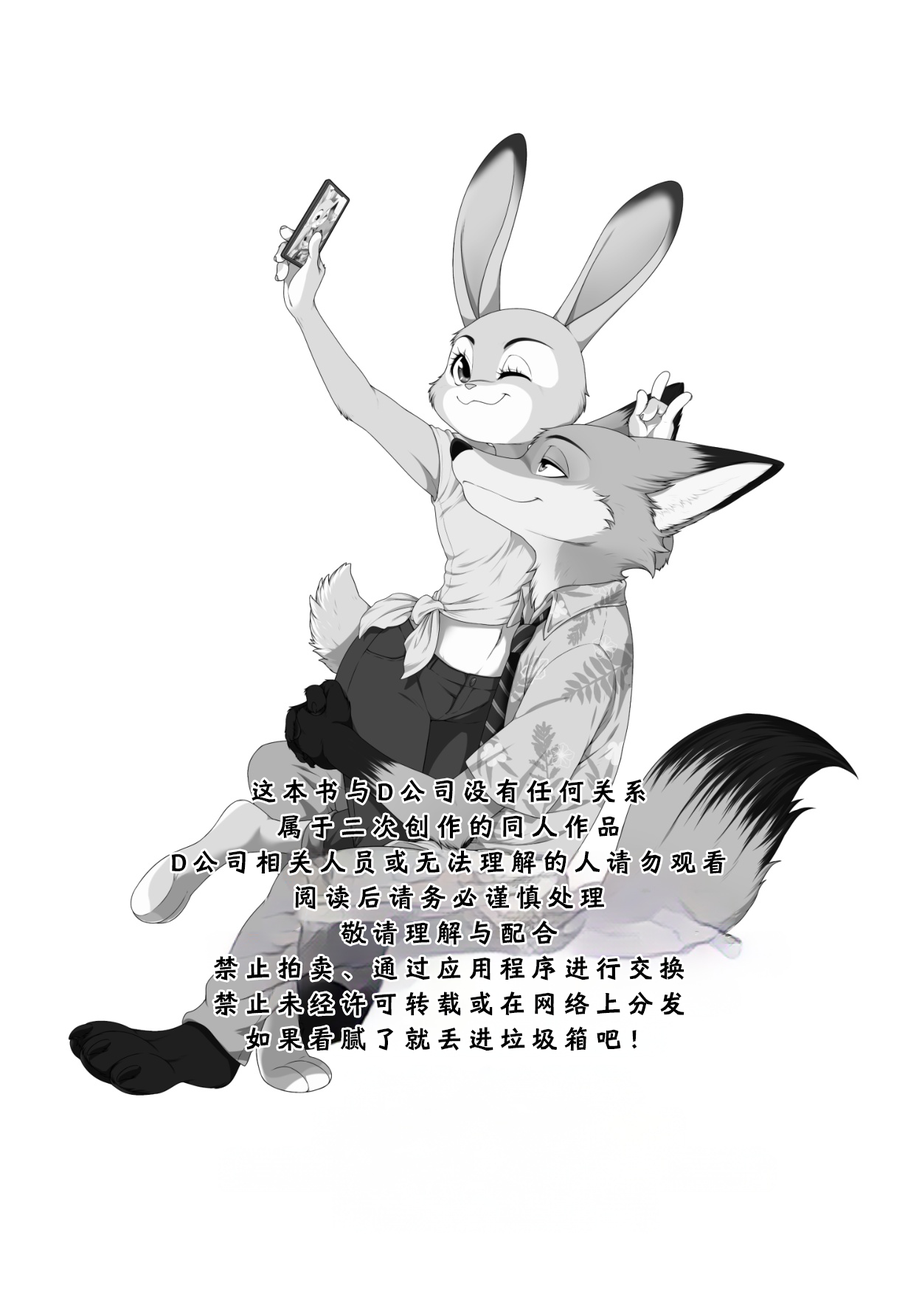
<style>
.page{position:relative;width:922px;height:1294px;background:#ffffff}
.page>*{position:absolute;margin:0}
.t1{font:26.5px/35.4px "HYShiWei75U";letter-spacing:0.2em;color:#000000}
</style>
<div class="page">
<p class="t1" style="left:171px;top:778px;width:555px;height:273px;text-align:center">这本书与D公司没有任何关系<br>属于二次创作的同人作品<br>D公司相关人员或无法理解的人请勿观看<br>阅读后请务必谨慎处理<br>敬请理解与配合<br>禁止拍卖、通过应用程序进行交换<br>禁止未经许可转载或在网络上分发<br>如果看腻了就丢进垃圾箱吧！</p>
</div>
